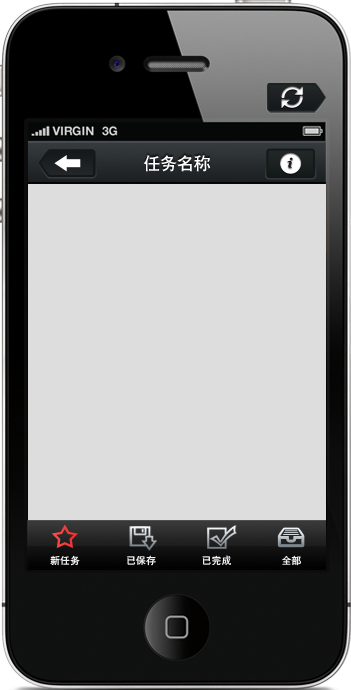
<style>
.page{position:relative;width:351px;height:690px;background:#dddddd}
.page>*{position:absolute;margin:0}
.t1{font:16.8px "CTCuHeiSJ";color:#ffffff}
.t2{font:10px "SimHei";color:#ffffff}
</style>
<div class="page">
<p class="t1" style="left:143px;top:155px;width:68px;height:17px">任务名称</p>
<p class="t2" style="left:50px;top:555px;width:30px;height:11px">新任务</p>
<p class="t2" style="left:127px;top:555px;width:29px;height:11px">已保存</p>
<p class="t2" style="left:202px;top:555px;width:29px;height:10px">已完成</p>
<p class="t2" style="left:282px;top:555px;width:19px;height:11px">全部</p>
</div>
